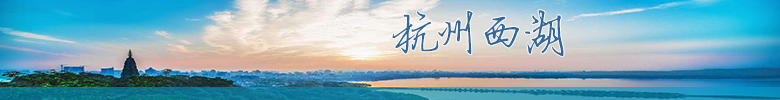
<style>
.page{position:relative;width:780px;height:100px}
.page>*{position:absolute;margin:0}
.t1{font:48px "FZYBXSJW--GB1-0";letter-spacing:-0.1em;color:#336699}
</style>
<div class="page">
<p class="t1" style="left:392px;top:10px;width:172px;height:47px">杭州西湖</p>
</div>
